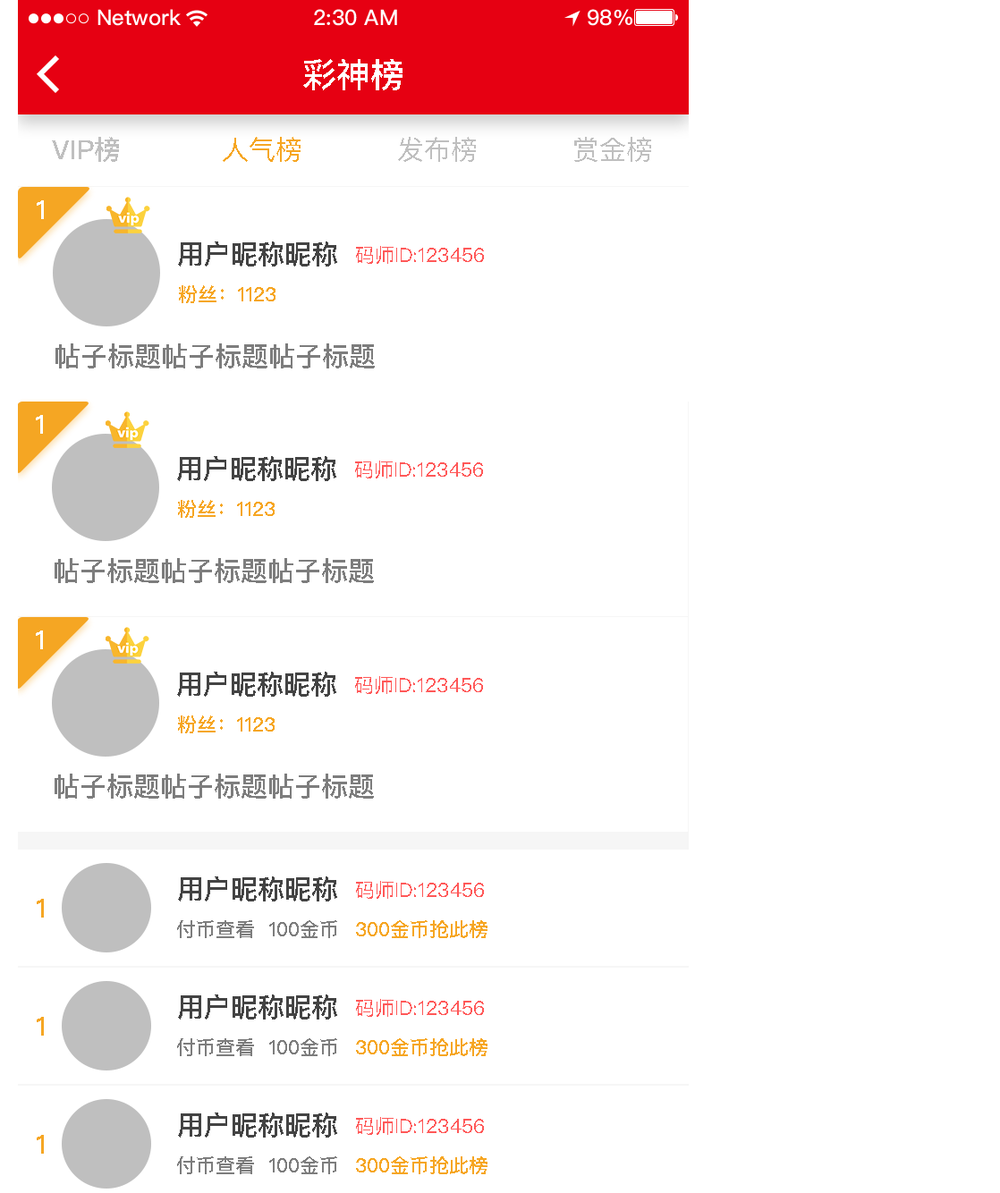
<style>
.page{position:relative;width:1000px;height:1193px;background:#ffffff}
.page>*{position:absolute;margin:0}
.t1{font:34px "PingFangSC-Medium";color:#ffffff;text-transform:uppercase}
.t2{font:26.8px "PingFangSC-Medium";color:#bfbfbf;text-transform:uppercase}
.t3{font:26.8px "PingFangSC-Regular";color:#f6a623;text-transform:uppercase}
.t4{font:26.8px "PingFangSC-Regular";color:#bfbfbf;text-transform:uppercase}
.t5{font:26.8px "PingFangSC-Medium";color:#ffffff;text-transform:uppercase}
.t6{font:26.8px "PingFangSC-Medium";color:#434343;text-transform:uppercase}
.t7{font:19.7px "PingFangSC-Regular";color:#ff5858;text-transform:uppercase}
.t8{font:19.7px "PingFangSC-Medium";color:#f6a623;text-transform:uppercase}
.t9{font:26.8px "PingFangSC-Medium";color:#7d7d7d;text-transform:uppercase}
.t10{font:26.8px "PingFangSC-Medium";color:#f6a623;text-transform:uppercase}
.t11{font:19.7px "PingFangSC-Medium";color:#7d7d7d;text-transform:uppercase}
</style>
<div class="page">
<p class="t1" style="left:303px;top:59px;width:99px;height:31px">彩神榜</p>
<p class="t2" style="left:52px;top:137px;width:67px;height:25px">vip榜</p>
<p class="t3" style="left:223px;top:137px;width:77px;height:25px">人气榜</p>
<p class="t4" style="left:398px;top:137px;width:78px;height:25px">发布榜</p>
<p class="t4" style="left:574px;top:137px;width:77px;height:25px">赏金榜</p>
<p class="t5" style="left:37px;top:200px;width:7px;height:19px">1</p>
<p class="t6" style="left:178px;top:241px;width:159px;height:25px">用户昵称昵称</p>
<p class="t7" style="left:356px;top:246px;width:128px;height:18px">码师id:123456</p>
<p class="t8" style="left:179px;top:285px;width:96px;height:18px">粉丝：1123</p>
<p class="t9" style="left:55px;top:343px;width:320px;height:25px">帖子标题帖子标题帖子标题</p>
<p class="t5" style="left:36px;top:415px;width:7px;height:19px">1</p>
<p class="t6" style="left:177px;top:456px;width:159px;height:25px">用户昵称昵称</p>
<p class="t7" style="left:355px;top:460px;width:128px;height:18px">码师id:123456</p>
<p class="t8" style="left:178px;top:500px;width:97px;height:18px">粉丝：1123</p>
<p class="t9" style="left:55px;top:558px;width:319px;height:25px">帖子标题帖子标题帖子标题</p>
<p class="t5" style="left:36px;top:630px;width:7px;height:19px">1</p>
<p class="t6" style="left:177px;top:672px;width:159px;height:25px">用户昵称昵称</p>
<p class="t7" style="left:355px;top:676px;width:128px;height:18px">码师id:123456</p>
<p class="t8" style="left:178px;top:715px;width:97px;height:18px">粉丝：1123</p>
<p class="t9" style="left:55px;top:773px;width:319px;height:25px">帖子标题帖子标题帖子标题</p>
<p class="t6" style="left:178px;top:876px;width:159px;height:25px">用户昵称昵称</p>
<p class="t7" style="left:356px;top:881px;width:128px;height:18px">码师id:123456</p>
<p class="t10" style="left:37px;top:899px;width:7px;height:18px">1</p>
<p class="t11" style="left:177px;top:920px;width:160px;height:18px">付币查看  100金币</p>
<p class="t8" style="left:356px;top:920px;width:131px;height:18px">300金币抢此榜</p>
<p class="t6" style="left:178px;top:994px;width:159px;height:25px">用户昵称昵称</p>
<p class="t7" style="left:356px;top:999px;width:128px;height:18px">码师id:123456</p>
<p class="t10" style="left:37px;top:1017px;width:7px;height:18px">1</p>
<p class="t11" style="left:177px;top:1038px;width:160px;height:18px">付币查看  100金币</p>
<p class="t8" style="left:356px;top:1038px;width:131px;height:18px">300金币抢此榜</p>
<p class="t6" style="left:178px;top:1112px;width:159px;height:25px">用户昵称昵称</p>
<p class="t7" style="left:356px;top:1117px;width:128px;height:18px">码师id:123456</p>
<p class="t10" style="left:37px;top:1135px;width:7px;height:18px">1</p>
<p class="t11" style="left:177px;top:1156px;width:160px;height:18px">付币查看  100金币</p>
<p class="t8" style="left:356px;top:1156px;width:131px;height:18px">300金币抢此榜</p>
</div>
